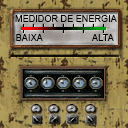
<style>
.page{position:relative;width:128px;height:128px}
.page>*{position:absolute;margin:0}
.t1{font:9px "ArialMT";color:#000000}
.t2{font:9px "ArialMT";letter-spacing:0.01em;color:#000000}
</style>
<div class="page">
<p class="t1" style="left:15px;top:15px;width:102px;height:7px">MEDIDOR DE ENERGIA</p>
<p class="t2" style="left:16px;top:34px;width:27px;height:7px">BAIXA</p>
<p class="t2" style="left:91px;top:34px;width:23px;height:7px">ALTA</p>
</div>
